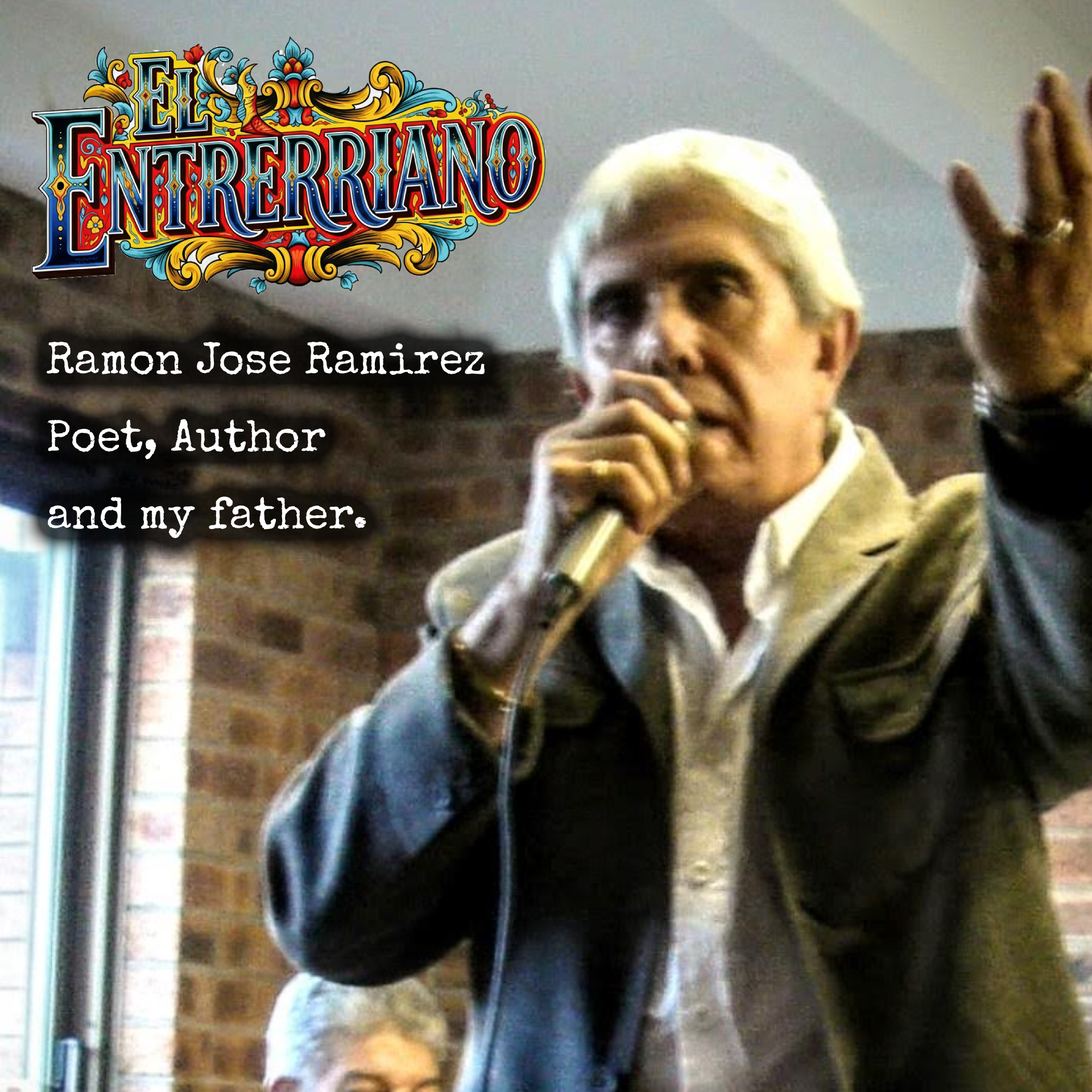
<style>
.page{position:relative;width:1092px;height:1092px}
.page>*{position:absolute;margin:0}
.t1{font:44.5px "SpecialElite-Regular";color:#ffffff}
</style>
<div class="page">
<p class="t1" style="left:47px;top:341px;width:438px;height:198px">Ramon Jose Ramirez<br>Poet, Author<br>and my father.</p>
</div>
